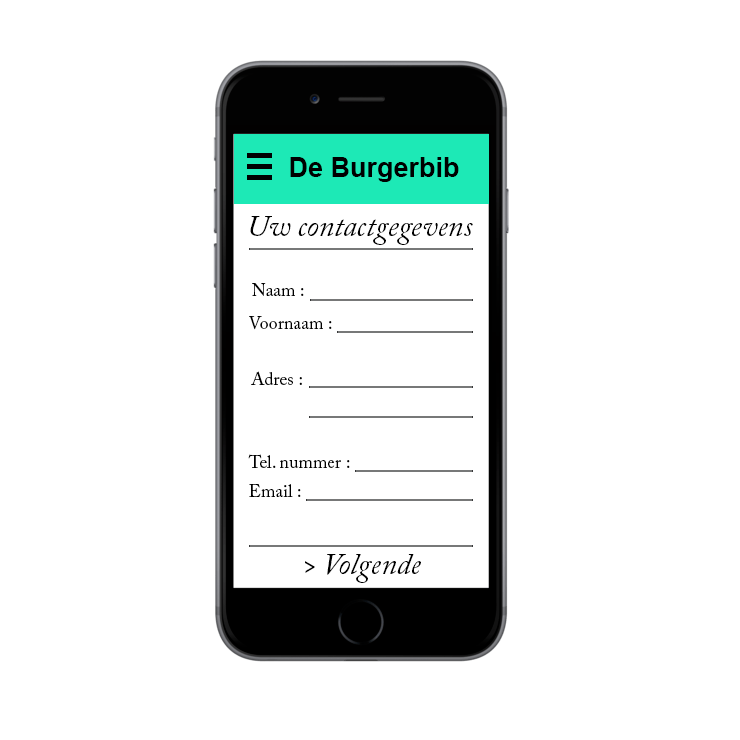
<style>
.page{position:relative;width:740px;height:740px;background:#ffffff}
.page>*{position:absolute;margin:0}
.t1{font:27px "Arial-BoldMT";color:#000000}
.t2{font:30px "ACaslonPro-Italic";color:#000000}
.t3{font:18px "ACaslonPro-Regular";color:#000000}
</style>
<div class="page">
<p class="t1" style="left:290px;top:157px;width:169px;height:25px">De Burgerbib</p>
<p class="t2" style="left:250px;top:216px;width:223px;height:29px">Uw contactgegevens</p>
<p class="t3" style="left:252px;top:283px;width:52px;height:13px">Naam :</p>
<p class="t3" style="left:249px;top:316px;width:83px;height:14px">Voornaam :</p>
<p class="t3" style="left:251px;top:371px;width:51px;height:14px">Adres :</p>
<p class="t3" style="left:248px;top:454px;width:102px;height:14px">Tel. nummer :</p>
<p class="t3" style="left:249px;top:484px;width:52px;height:13px">Email :</p>
<p class="t2" style="left:305px;top:554px;width:116px;height:29px">&gt; Volgende</p>
</div>
